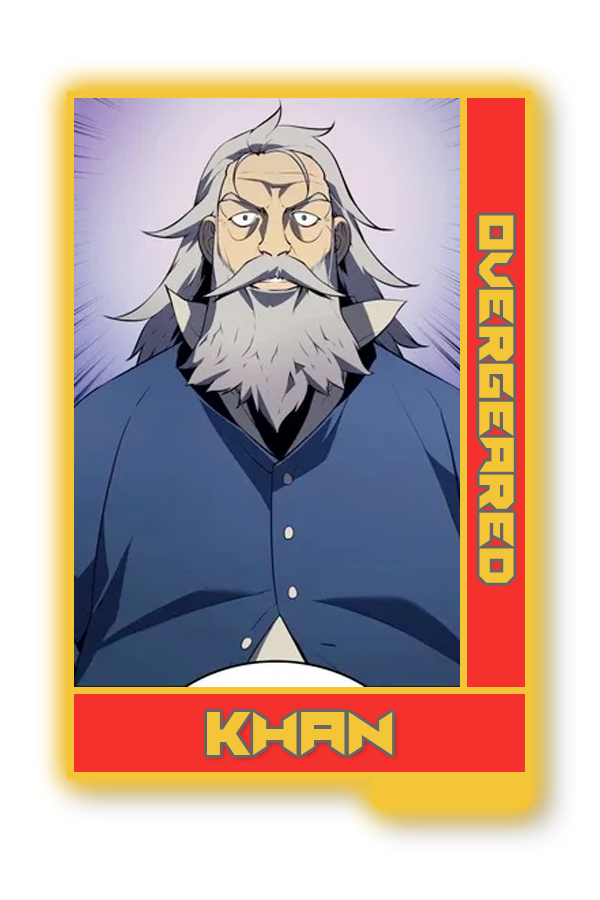
<style>
.page{position:relative;width:600px;height:900px;background:#ffffff}
.page>*{position:absolute;margin:0}
.t1{font:48.8px "Suggested-Regular";color:#f4c536}
.t2{font:62.5px "Suggested-Regular";color:#f4c536}
</style>
<div class="page">
<p class="t1" style="left:479px;top:215px;width:35px;height:368px;rotate:90deg">OVERGEARED</p>
<p class="t2" style="left:207px;top:712px;width:186px;height:43px">KHAN</p>
</div>
